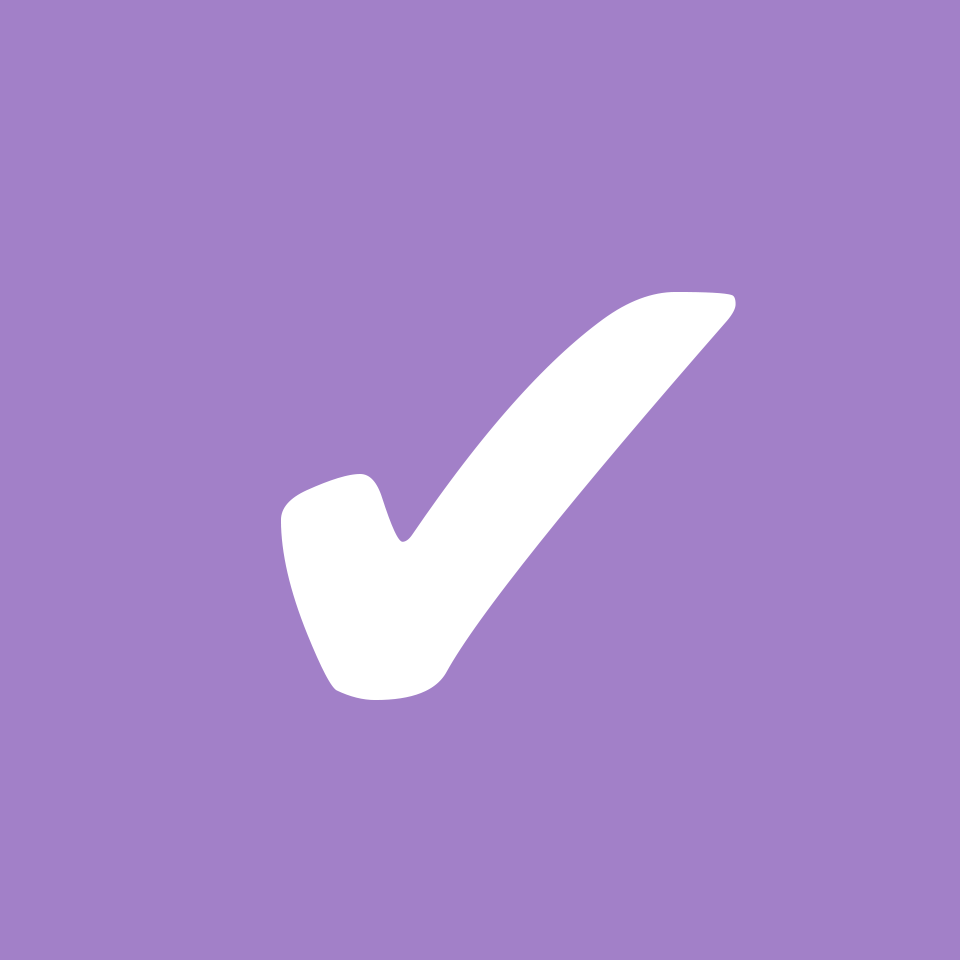
<style>
.page{position:relative;width:960px;height:960px;background:#a280c8}
.page>*{position:absolute;margin:0}
.t1{font:858px "Menlo-Regular";color:#ffffff}
</style>
<div class="page">
<p class="t1" style="left:281px;top:292px;width:455px;height:408px">✔︎</p>
</div>
